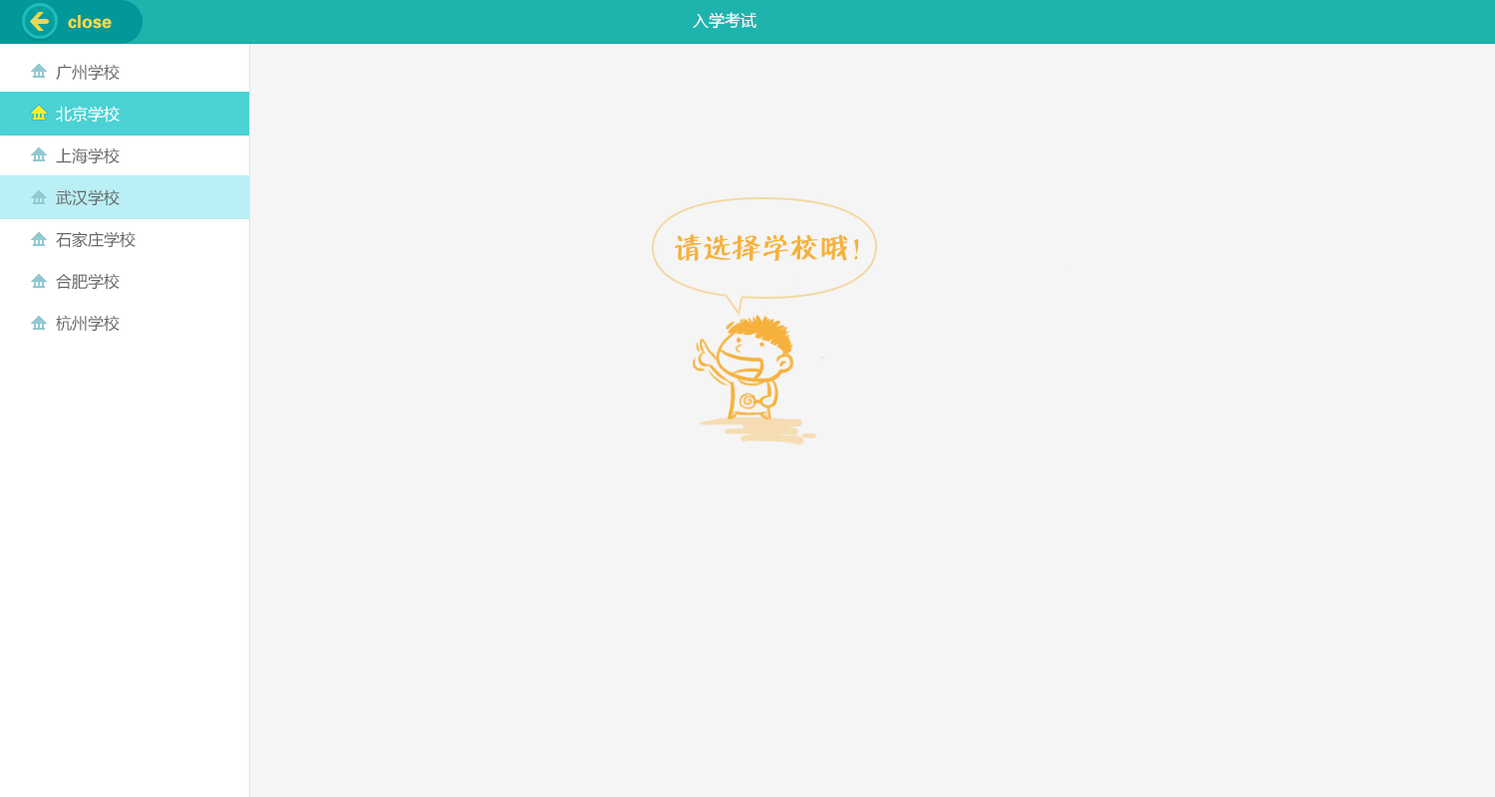
<style>
.page{position:relative;width:1495px;height:797px;background:#f5f5f5}
.page>*{position:absolute;margin:0}
.t1{font:15.9px "MicrosoftYaHei";color:#ffffff}
.t2{font:15.9px/41.9px "MicrosoftYaHei";color:#666666}
.t3{font:15.9px/41.9px "MicrosoftYaHei";color:#ffffff}
.t4{font:29.2px "FZZBHJW--GB1-0";color:#f5b13c}
</style>
<div class="page">
<p class="t1" style="left:693px;top:12px;width:64px;height:17px">入学考试</p>
<p class="t2" style="left:56px;top:64px;width:80px;height:268px">广州学校<br><span class="t3">北京学校<br></span>上海学校<br>武汉学校<br>石家庄学校<br>合肥学校<br>杭州学校</p>
<p class="t4" style="left:675px;top:234px;width:183px;height:27px">请选择学校哦！</p>
</div>
